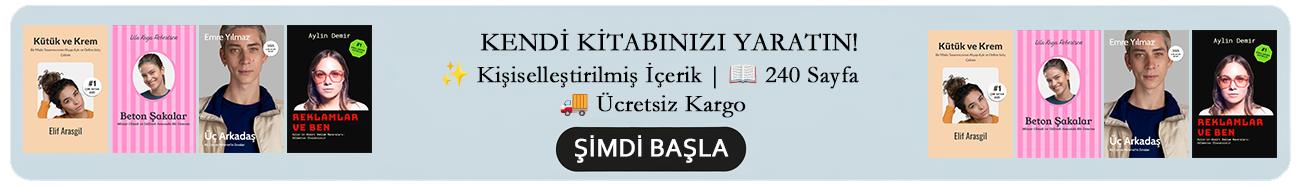
<style>
.page{position:relative;width:1301px;height:188px}
.page>*{position:absolute;margin:0}
.t1{font:26px "Garamond";color:#000000;font-weight:bold}
.t2{font:24px "Garamond";font-weight:bold}
.t3{font:24px "NotoColorEmoji-SVG";font-weight:bold}
.t4{font:26px "Corbel";color:#ffffff;font-weight:bold}
</style>
<div class="page">
<p class="t1" style="left:480px;top:29px;width:377px;height:22px">KENDİ KİTABINIZI YARATIN!</p>
<p class="t2" style="left:441px;top:61px;width:418px;height:57px;text-align:center"><span class="t3">✨</span> Kişiselleştirilmiş İçerik | <span class="t3">📖</span> 240 Sayfa<br> <span class="t3">🚚</span> Ücretsiz Kargo</p>
<p class="t4" style="left:575px;top:135px;width:154px;height:28px">ŞİMDİ BAŞLA</p>
</div>
